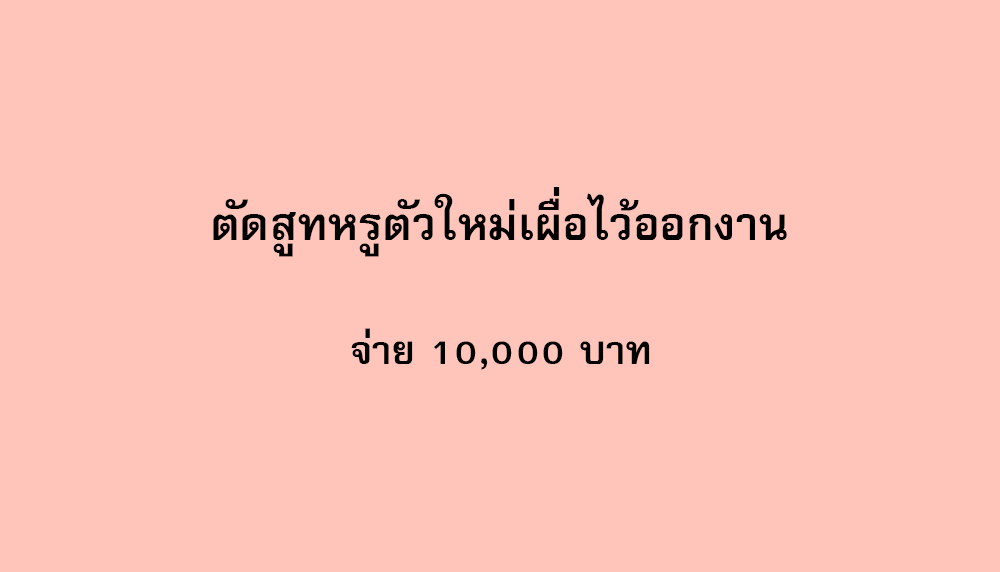
<style>
.page{position:relative;width:1000px;height:572px;background:#ffc4ba}
.page>*{position:absolute;margin:0}
.t1{font:64px "FreesiaUPCBold";color:#000000}
.t2{font:56px "FreesiaUPCBold";color:#000000}
</style>
<div class="page">
<p class="t1" style="left:213px;top:187px;width:574px;height:70px">ตัดสูทหรูตัวใหม่เผื่อไว้ออกงาน</p>
<p class="t2" style="left:351px;top:328px;width:299px;height:42px">จ่าย 10,000 บาท</p>
</div>
